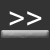
<style>
.page{position:relative;width:50px;height:50px;background:#333333}
.page>*{position:absolute;margin:0}
.t1{font:30px "ArialMT";color:#ffffff}
</style>
<div class="page">
<p class="t1" style="left:9px;top:11px;width:33px;height:15px">&gt;&gt;</p>
</div>
